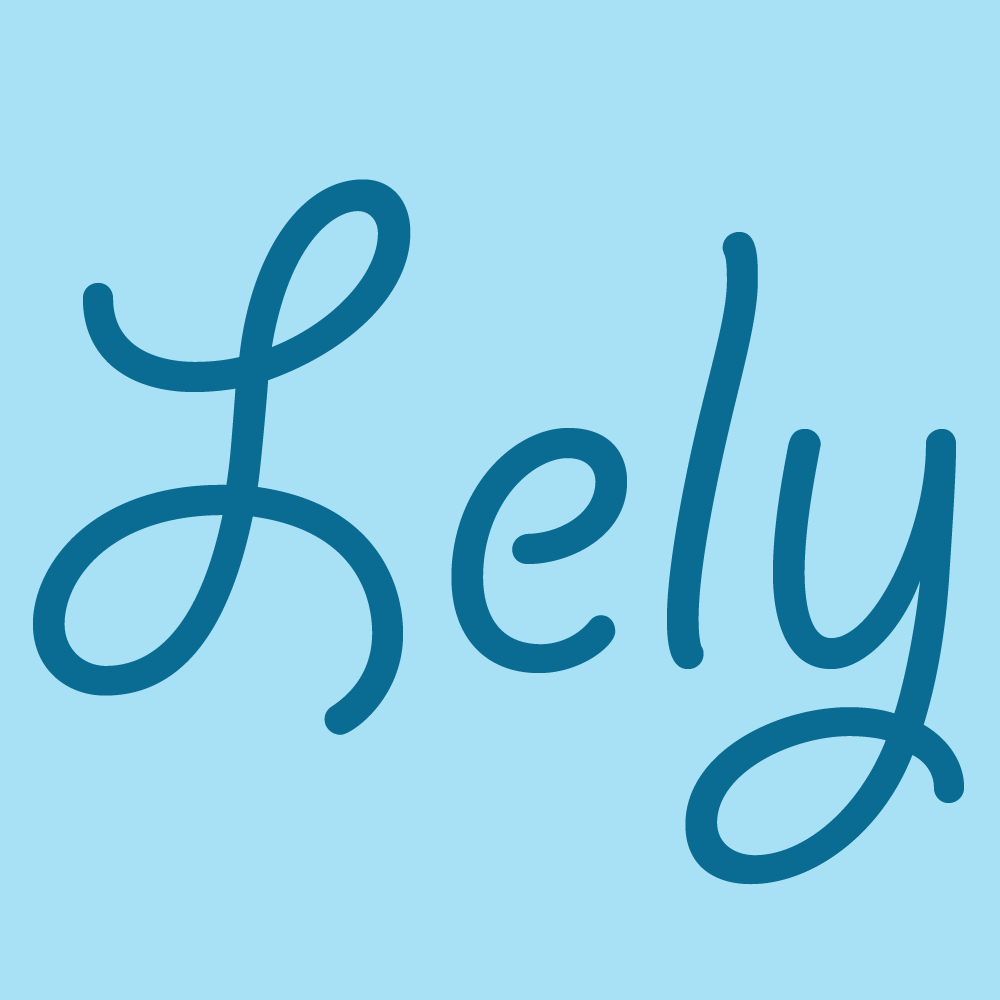
<style>
.page{position:relative;width:1000px;height:1000px;background:#a8e0f6}
.page>*{position:absolute;margin:0}
.t1{font:700px "GiddyupStd";color:#0a6c92}
</style>
<div class="page">
<p class="t1" style="left:33px;top:179px;width:931px;height:706px">Lely</p>
</div>
